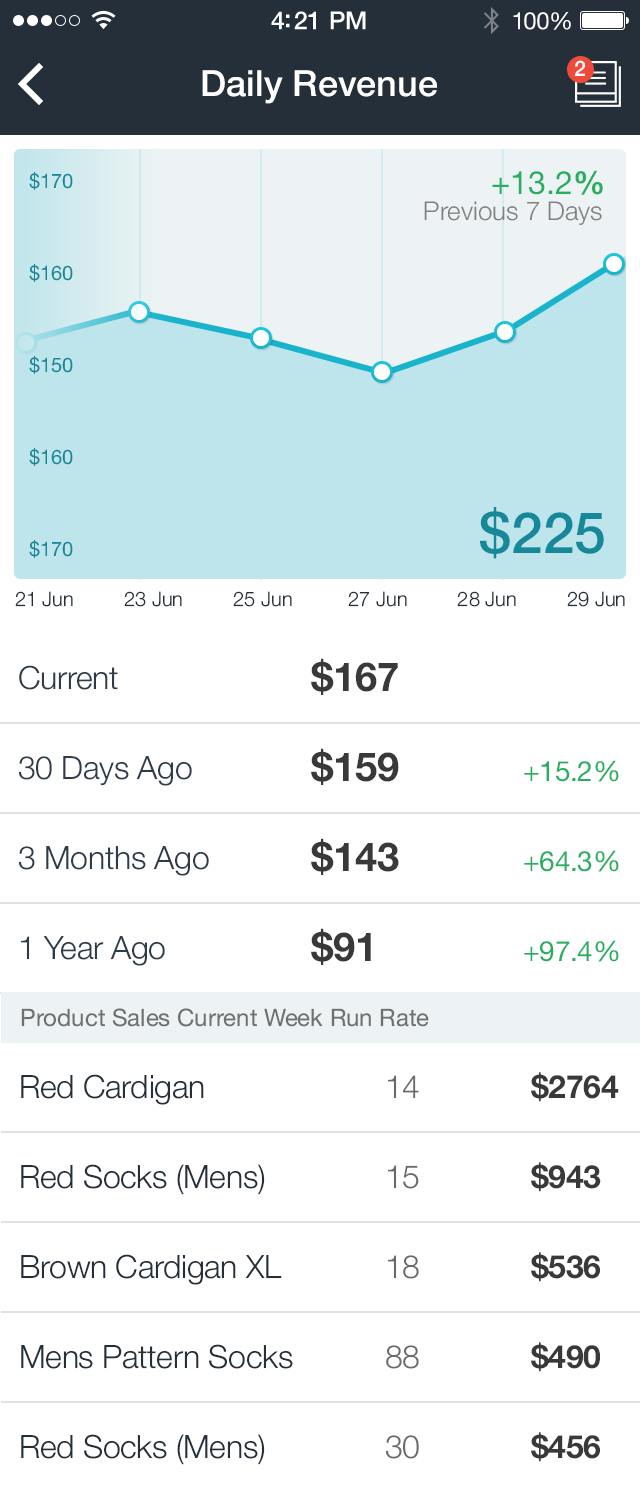
<style>
.page{position:relative;width:640px;height:1491px;background:#ffffff}
.page>*{position:absolute;margin:0}
.t1{font:25px "HelveticaNeue-Medium";letter-spacing:-0.02em;color:#ffffff}
.t2{font:24px "HelveticaNeue";letter-spacing:-0.02em;color:#ffffff}
.t3{font:21.4px "HelveticaNeue-Medium";color:#ffffff}
.t4{font:36px "HelveticaNeue-Medium";color:#ffffff}
.t5{font:20px/92px "HelveticaNeue";color:#16889a}
.t6{font:32.1px "HelveticaNeue";color:#27ae60}
.t7{font:32.1px "HelveticaNeue-Bold";color:#27ae60}
.t8{font:25.9px "HelveticaNeue-Light";color:#808080}
.t9{font:57px "HelveticaNeue-Medium";color:#16889a}
.t10{font:20px "HelveticaNeue-Light";color:#252f39}
.t11{font:32px "HelveticaNeue-Light";letter-spacing:-0.01em;color:#2e3c49}
.t12{font:40px "HelveticaNeue-Bold";letter-spacing:-0.01em;color:#393939}
.t13{font:28px "HelveticaNeue";letter-spacing:-0.01em;color:#27ae60}
.t14{font:24px "HelveticaNeue";color:#707070}
.t15{font:32px "HelveticaNeue-Bold";letter-spacing:-0.01em;color:#393939}
.t16{font:32px "HelveticaNeue-Light";letter-spacing:-0.01em;color:#252f39}
.t17{font:32px "HelveticaNeue-Light";letter-spacing:-0.01em;color:#6a6a6a}
</style>
<div class="page">
<p class="t1" style="left:271px;top:11px;width:95px;height:19px">4:21 PM</p>
<p class="t2" style="left:513px;top:11px;width:58px;height:19px">100%</p>
<p class="t3" style="left:574px;top:60px;width:11px;height:16px">2</p>
<p class="t4" style="left:202px;top:70px;width:235px;height:34px">Daily Revenue</p>
<p class="t5" style="left:29px;top:172px;width:44px;height:386px">$170<br>$160<br>$150<br>$160<br>$170</p>
<p class="t6" style="left:492px;top:170px;width:111px;height:25px">+13.2<span class="t7">%</span></p>
<p class="t8" style="left:424px;top:201px;width:178px;height:24px">Previous 7 Days</p>
<p class="t9" style="left:480px;top:507px;width:124px;height:52px">$225</p>
<p class="t10" style="left:15px;top:591px;width:610px;height:16px">21 Jun         23 Jun         25 Jun          27 Jun         28 Jun         29 Jun</p>
<p class="t11" style="left:19px;top:665px;width:99px;height:25px">Current</p>
<p class="t12" style="left:311px;top:658px;width:87px;height:37px">$167</p>
<p class="t12" style="left:311px;top:748px;width:88px;height:37px">$159</p>
<p class="t11" style="left:18px;top:756px;width:174px;height:30px">30 Days Ago</p>
<p class="t13" style="left:524px;top:760px;width:95px;height:22px">+15.2%</p>
<p class="t11" style="left:18px;top:846px;width:191px;height:30px">3 Months Ago</p>
<p class="t12" style="left:311px;top:838px;width:88px;height:37px">$143</p>
<p class="t13" style="left:524px;top:850px;width:95px;height:22px">+64.3%</p>
<p class="t12" style="left:311px;top:928px;width:60px;height:37px">$91</p>
<p class="t11" style="left:21px;top:936px;width:144px;height:30px">1 Year Ago</p>
<p class="t13" style="left:524px;top:940px;width:95px;height:22px">+97.4%</p>
<p class="t14" style="left:21px;top:1008px;width:408px;height:19px">Product Sales Current Week Run Rate</p>
<p class="t15" style="left:531px;top:1072px;width:88px;height:30px">$2764</p>
<p class="t16" style="left:21px;top:1074px;width:183px;height:31px">Red Cardigan</p>
<p class="t17" style="left:388px;top:1075px;width:31px;height:24px">14</p>
<p class="t16" style="left:21px;top:1164px;width:244px;height:31px">Red Socks (Mens)</p>
<p class="t17" style="left:388px;top:1165px;width:31px;height:24px">15</p>
<p class="t15" style="left:531px;top:1162px;width:70px;height:30px">$943</p>
<p class="t16" style="left:21px;top:1254px;width:261px;height:31px">Brown Cardigan XL</p>
<p class="t15" style="left:531px;top:1252px;width:69px;height:30px">$536</p>
<p class="t17" style="left:388px;top:1255px;width:31px;height:24px">18</p>
<p class="t16" style="left:21px;top:1344px;width:272px;height:25px">Mens Pattern Socks</p>
<p class="t17" style="left:386px;top:1345px;width:33px;height:24px">88</p>
<p class="t15" style="left:531px;top:1342px;width:69px;height:30px">$490</p>
<p class="t15" style="left:531px;top:1432px;width:69px;height:30px">$456</p>
<p class="t16" style="left:21px;top:1434px;width:244px;height:31px">Red Socks (Mens)</p>
<p class="t17" style="left:385px;top:1435px;width:34px;height:24px">30</p>
</div>
